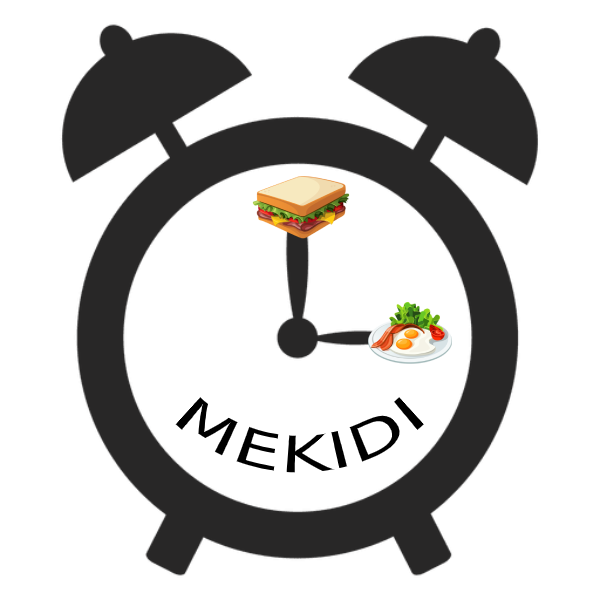
<style>
.page{position:relative;width:600px;height:600px;background:#ffffff}
.page>*{position:absolute;margin:0}
.t1{font:50px "DejaVuSans";color:#000000}
</style>
<div class="page">
<p class="t1" style="left:175px;top:397px;width:249px;height:76px">MEKIDI</p>
</div>
